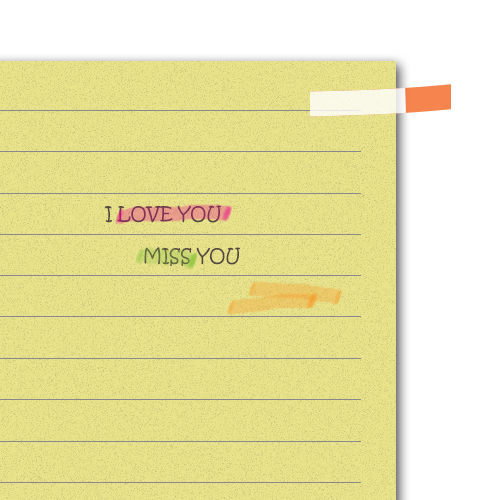
<style>
.page{position:relative;width:500px;height:500px;background:#e9e38b}
.page>*{position:absolute;margin:0}
.t1{font:18px/14px "KristenITC-Regular"}
</style>
<div class="page">
<p class="t1" style="left:105px;top:205px;width:135px;height:61px">I LOVE YOU<br><br><br>       MISS YOU</p>
</div>
